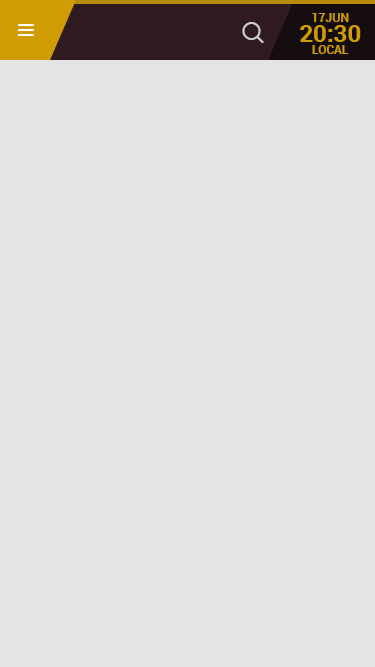
<style>
.page{position:relative;width:375px;height:667px;background:#e4e4e4}
.page>*{position:absolute;margin:0}
.t1{font:12px "Roboto-Bold";color:#d09c04;text-transform:uppercase}
.t2{font:24px "Roboto-Bold";color:#d09c04}
</style>
<div class="page">
<p class="t1" style="left:312px;top:13px;width:37px;height:9px">17Jun</p>
<p class="t2" style="left:300px;top:25px;width:61px;height:17px">20:30</p>
<p class="t1" style="left:312px;top:45px;width:37px;height:9px">local</p>
</div>
